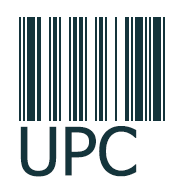
<style>
.page{position:relative;width:188px;height:188px;background:#ffffff}
.page>*{position:absolute;margin:0}
.t1{font:66.7px "Tahoma";color:#14343b}
</style>
<div class="page">
<p class="t1" style="left:20px;top:126px;width:117px;height:51px">UPC</p>
</div>
